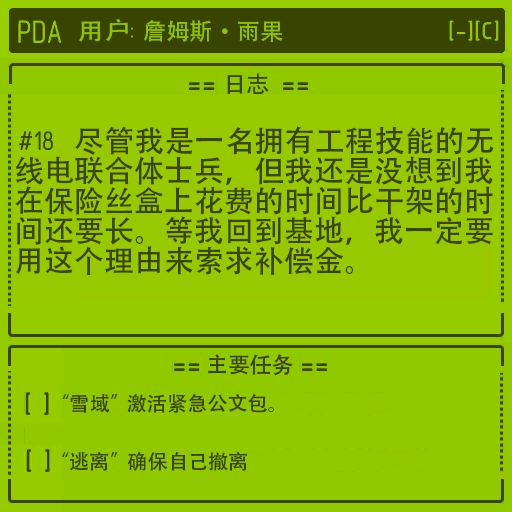
<style>
.page{position:relative;width:512px;height:512px;background:#90c900}
.page>*{position:absolute;margin:0}
.t1{font:30px/30px "AdobeHeitiStd-Regular";color:#384400}
</style>
<div class="page">
<p class="t1" style="left:15px;top:126px;width:479px;height:149px">尽管我是一名拥有工程技能的无<br>线电联合体士兵，但我还是没想到我<br>在保险丝盒上花费的时间比干架的时<br>间还要长。等我回到基地，我一定要<br>用这个理由来索求补偿金。</p>
</div>
